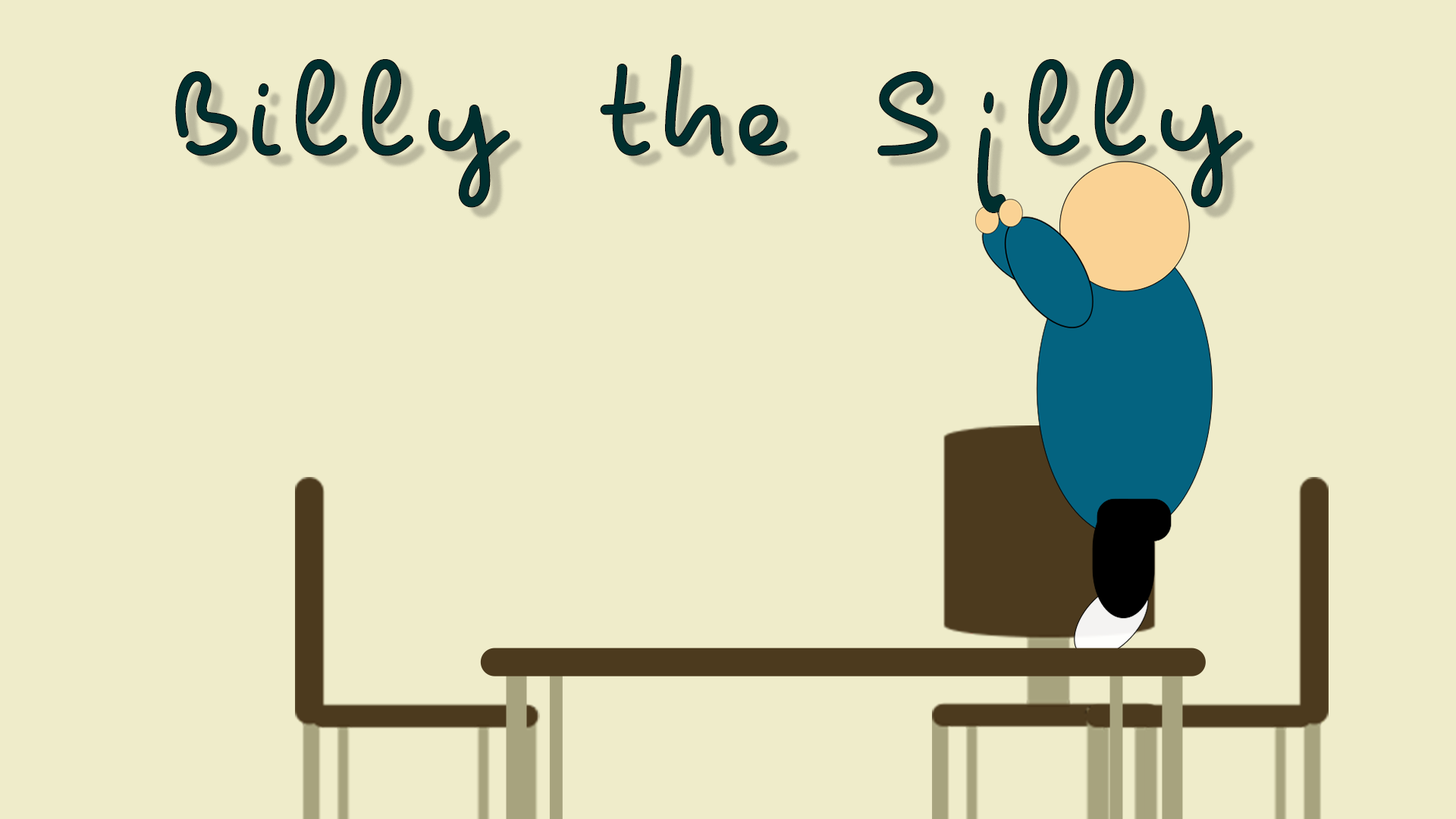
<style>
.page{position:relative;width:1456px;height:819px;background:#efecca}
.page>*{position:absolute;margin:0}
.t1{font:151.7px "Pecita";color:#002f2f;font-weight:bold}
.t2{font:255.1px "Pecita";color:#002f2f;font-weight:bold;scale:0.59 1}
</style>
<div class="page">
<p class="t1" style="left:175px;top:55px;width:1068px;height:153px">Billy the S lly</p>
<p class="t2" style="left:977px;top:92px;width:29px;height:121px">i</p>
</div>
